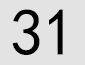
<style>
.page{position:relative;width:85px;height:65px;background:#e3e3e3}
.page>*{position:absolute;margin:0}
.t1{font:66.7px "SimHei";color:#020202}
</style>
<div class="page">
<p class="t1" style="left:12px;top:9px;width:51px;height:46px">31</p>
</div>
